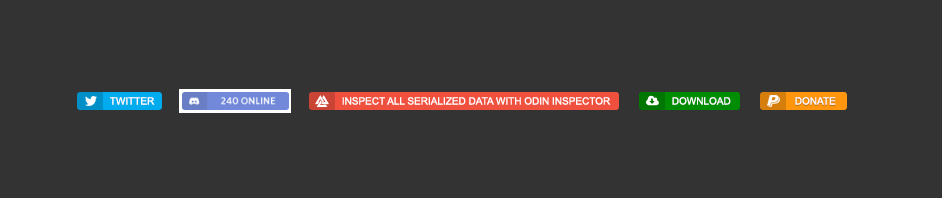
<style>
.page{position:relative;width:942px;height:198px;background:#333333}
.page>*{position:absolute;margin:0}
.t1{font:10px "ArialMT";color:#ffffff;text-transform:uppercase}
</style>
<div class="page">
<p class="t1" style="left:110px;top:97px;width:45px;height:8px">Twitter</p>
<p class="t1" style="left:342px;top:97px;width:269px;height:8px">Inspect ALL serialized data with Odin Inspector</p>
<p class="t1" style="left:672px;top:97px;width:59px;height:8px">Download</p>
<p class="t1" style="left:795px;top:97px;width:41px;height:8px">Donate</p>
</div>
